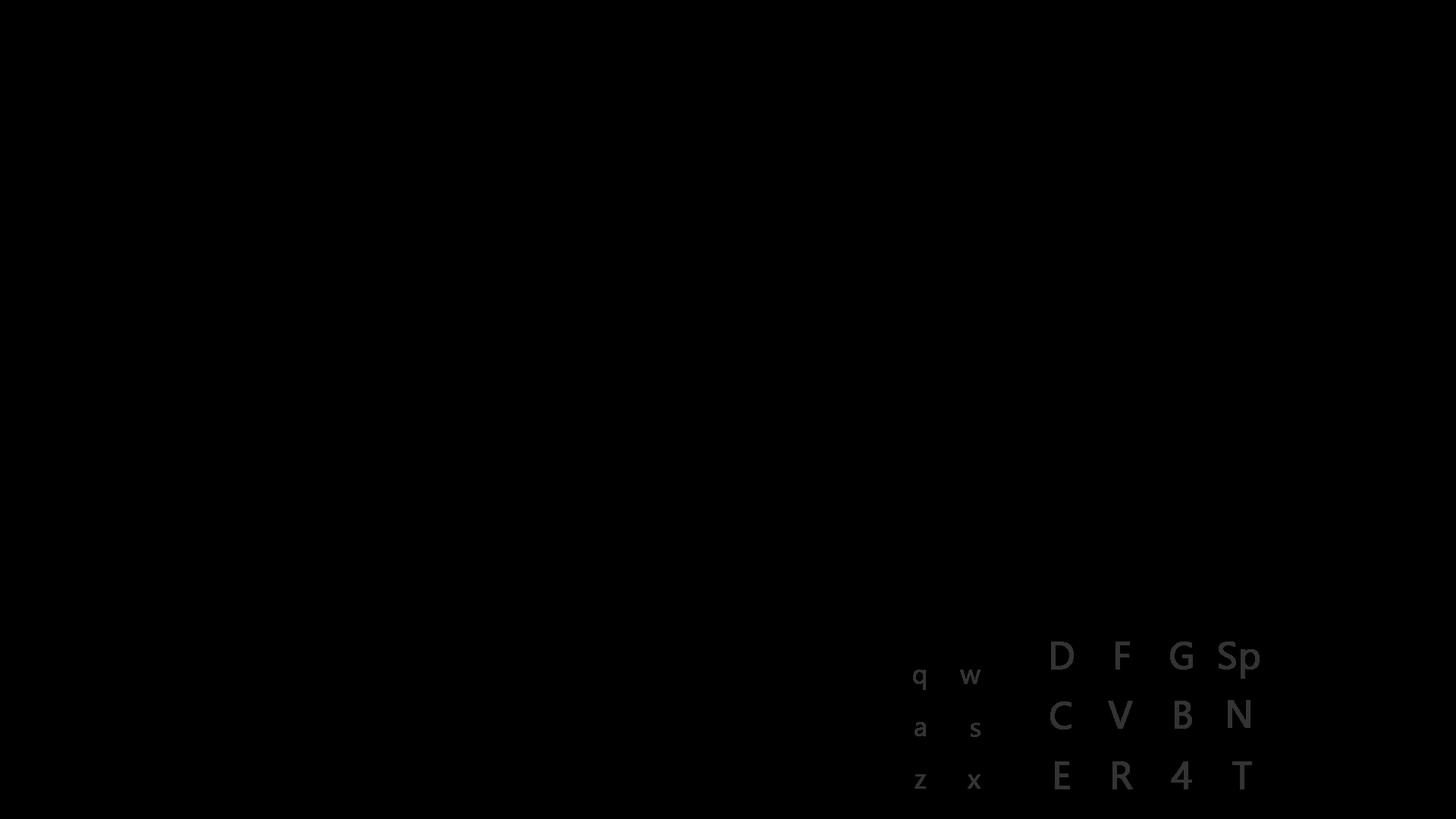
<style>
.page{position:relative;width:1456px;height:819px;background:#000000}
.page>*{position:absolute;margin:0}
.t1{font:37.9px "SegoeUI";color:#333333;font-weight:bold}
.t2{font:27.3px "SegoeUI";color:#333333;font-weight:bold}
</style>
<div class="page">
<p class="t1" style="left:1051px;top:642px;width:23px;height:28px">D</p>
<p class="t1" style="left:1115px;top:642px;width:15px;height:28px">F</p>
<p class="t1" style="left:1170px;top:642px;width:23px;height:28px">G</p>
<p class="t1" style="left:1219px;top:642px;width:41px;height:37px">Sp</p>
<p class="t2" style="left:913px;top:670px;width:13px;height:20px">q</p>
<p class="t2" style="left:960px;top:670px;width:21px;height:14px">w</p>
<p class="t1" style="left:1050px;top:701px;width:22px;height:29px">C</p>
<p class="t1" style="left:1108px;top:701px;width:25px;height:28px">V</p>
<p class="t1" style="left:1175px;top:701px;width:17px;height:28px">B</p>
<p class="t1" style="left:1228px;top:700px;width:22px;height:28px">N</p>
<p class="t2" style="left:915px;top:722px;width:11px;height:14px">a</p>
<p class="t2" style="left:971px;top:723px;width:10px;height:14px">s</p>
<p class="t1" style="left:1055px;top:761px;width:15px;height:28px">E</p>
<p class="t1" style="left:1112px;top:761px;width:21px;height:28px">R</p>
<p class="t1" style="left:1171px;top:761px;width:21px;height:28px">4</p>
<p class="t1" style="left:1232px;top:761px;width:20px;height:28px">T</p>
<p class="t2" style="left:915px;top:774px;width:11px;height:15px">z</p>
<p class="t2" style="left:968px;top:774px;width:13px;height:15px">x</p>
</div>
